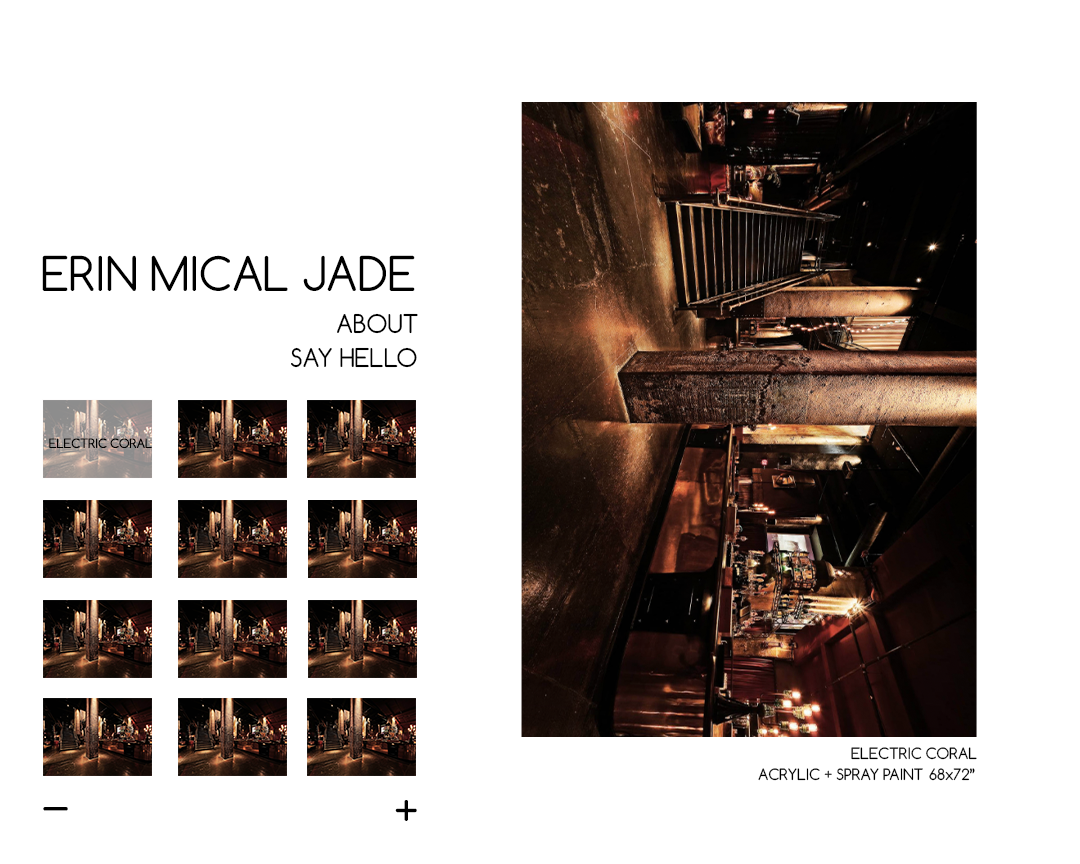
<style>
.page{position:relative;width:1080px;height:864px;background:#ffffff}
.page>*{position:absolute;margin:0}
.t1{font:45px "Comfortaa-Regular";color:#000000}
.t2{font:24.3px "Comfortaa-Regular";color:#000000}
.t3{font:12.2px "Comfortaa-Regular";color:#000000}
.t4{font:14.9px "Comfortaa-Regular";color:#000000}
</style>
<div class="page">
<p class="t1" style="left:42px;top:255px;width:373px;height:36px">ERIN MICAL JADE</p>
<p class="t2" style="left:337px;top:313px;width:81px;height:21px">ABOUT</p>
<p class="t2" style="left:291px;top:347px;width:126px;height:21px">SAY HELLO</p>
<p class="t3" style="left:49px;top:438px;width:103px;height:10px">ELECTRIC CORAL</p>
<p class="t4" style="left:851px;top:747px;width:126px;height:13px">ELECTRIC CORAL</p>
<p class="t4" style="left:758px;top:768px;width:165px;height:13px">ACRYLIC + SPRAY PAINT</p>
<p class="t4" style="left:929px;top:768px;width:46px;height:13px">68x72”</p>
<p class="t1" style="left:43px;top:807px;width:25px;height:4px">_</p>
<p class="t1" style="left:395px;top:800px;width:22px;height:21px">+</p>
</div>
